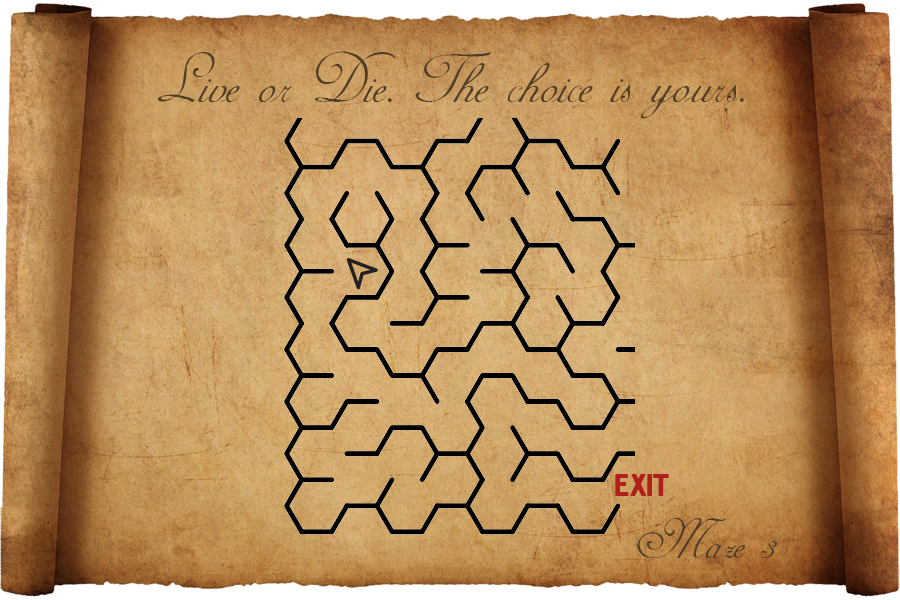
<style>
.page{position:relative;width:900px;height:600px}
.page>*{position:absolute;margin:0}
.t1{font:80px "AdineKirnberg-Script";color:#513e27}
.t2{font:32px "Hermes";color:#b21e1e}
.t3{font:64px "AdineKirnberg-Script";color:#513e27}
</style>
<div class="page">
<p class="t1" style="left:157px;top:51px;width:587px;height:68px">Live or Die. The choice is yours.</p>
<p class="t2" style="left:615px;top:474px;width:54px;height:22px">EXIT</p>
<p class="t3" style="left:637px;top:518px;width:140px;height:40px">Maze 3</p>
</div>
